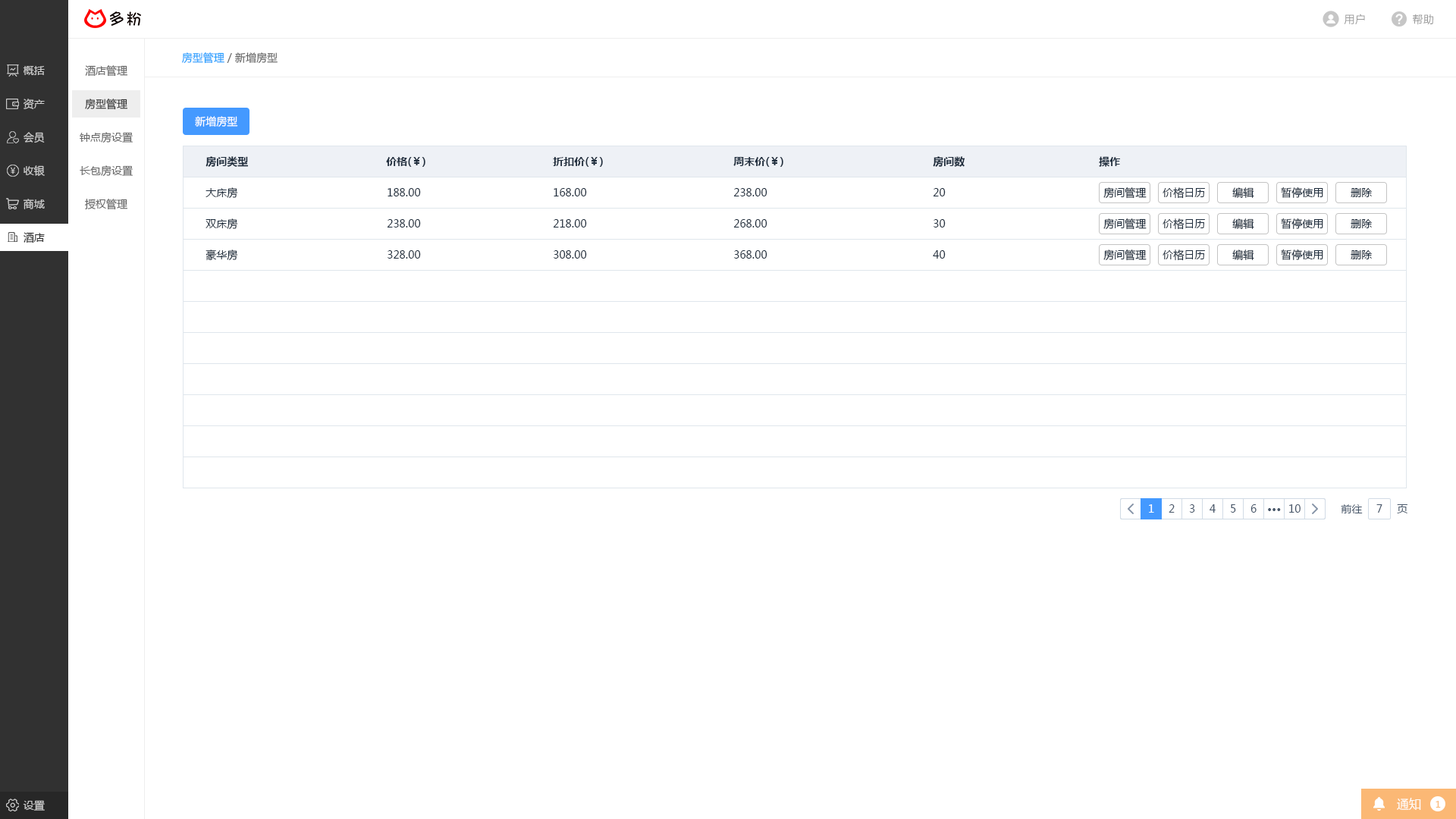
<style>
.page{position:relative;width:1456px;height:819px;background:#ffffff}
.page>*{position:absolute;margin:0}
.t1{font:10.6px "MicrosoftYaHei";letter-spacing:0.025em;color:#999999}
.t2{font:10.6px "MicrosoftYaHei";color:#666666}
.t3{font:10.6px "MicrosoftYaHei";color:#20a0ff}
.t4{font:10.6px "MicrosoftYaHei";color:#cccccc}
.t5{font:10.6px "MicrosoftYaHei";color:#333333}
.t6{font:10.6px "MicrosoftYaHei";color:#ffffff}
.t7{font:10.6px "MicrosoftYaHei-Bold";color:#1f2d3d}
.t8{font:10.6px "MicrosoftYaHei";color:#1f2d3d}
.t9{font:10.6px "MicrosoftYaHei";color:#313131}
.t10{font:10.6px "MicrosoftYaHei";color:#48576a}
.t11{font:10.6px "MicrosoftYaHei-Bold";color:#48576a}
.t12{font:12.1px "MicrosoftYaHei";color:#ffffff}
.t13{font:9.1px "MicrosoftYaHei";color:#fbb875}
</style>
<div class="page">
<p class="t1" style="left:1344px;top:14px;width:21px;height:11px">用户</p>
<p class="t1" style="left:1413px;top:14px;width:20px;height:11px">帮助</p>
<p class="t2" style="left:182px;top:52px;width:96px;height:12px"><span class="t3">房型管理</span> / 新增房型</p>
<p class="t4" style="left:23px;top:66px;width:22px;height:9px">概括</p>
<p class="t2" style="left:85px;top:65px;width:42px;height:12px">酒店管理</p>
<p class="t4" style="left:24px;top:99px;width:21px;height:10px">资产</p>
<p class="t5" style="left:85px;top:99px;width:42px;height:11px">房型管理</p>
<p class="t6" style="left:195px;top:116px;width:43px;height:11px">新增房型</p>
<p class="t4" style="left:24px;top:132px;width:21px;height:11px">会员</p>
<p class="t2" style="left:80px;top:132px;width:53px;height:11px">钟点房设置</p>
<p class="t7" style="left:206px;top:156px;width:42px;height:11px">房间类型</p>
<p class="t7" style="left:386px;top:157px;width:39px;height:10px">价格(￥)</p>
<p class="t7" style="left:553px;top:157px;width:50px;height:10px">折扣价(￥)</p>
<p class="t7" style="left:733px;top:157px;width:50px;height:10px">周末价(￥)</p>
<p class="t7" style="left:933px;top:156px;width:32px;height:11px">房间数</p>
<p class="t7" style="left:1099px;top:156px;width:21px;height:11px">操作</p>
<p class="t4" style="left:24px;top:165px;width:21px;height:11px">收银</p>
<p class="t2" style="left:80px;top:165px;width:53px;height:12px">长包房设置</p>
<p class="t8" style="left:206px;top:187px;width:32px;height:12px">大床房</p>
<p class="t8" style="left:388px;top:188px;width:33px;height:8px">188.00</p>
<p class="t8" style="left:554px;top:188px;width:33px;height:8px">168.00</p>
<p class="t8" style="left:733px;top:188px;width:34px;height:8px">238.00</p>
<p class="t8" style="left:933px;top:188px;width:13px;height:8px">20</p>
<p class="t8" style="left:1103px;top:187px;width:44px;height:12px">房间管理</p>
<p class="t8" style="left:1163px;top:187px;width:42px;height:12px">价格日历</p>
<p class="t8" style="left:1232px;top:187px;width:22px;height:11px">编辑</p>
<p class="t8" style="left:1281px;top:187px;width:42px;height:11px">暂停使用</p>
<p class="t8" style="left:1351px;top:188px;width:22px;height:9px">删除</p>
<p class="t4" style="left:23px;top:199px;width:22px;height:10px">商城</p>
<p class="t2" style="left:85px;top:199px;width:42px;height:11px">授权管理</p>
<p class="t8" style="left:206px;top:218px;width:32px;height:12px">双床房</p>
<p class="t8" style="left:387px;top:219px;width:34px;height:8px">238.00</p>
<p class="t8" style="left:553px;top:219px;width:34px;height:8px">218.00</p>
<p class="t8" style="left:733px;top:219px;width:34px;height:8px">268.00</p>
<p class="t8" style="left:933px;top:219px;width:13px;height:8px">30</p>
<p class="t8" style="left:1103px;top:218px;width:44px;height:12px">房间管理</p>
<p class="t8" style="left:1163px;top:218px;width:42px;height:12px">价格日历</p>
<p class="t8" style="left:1232px;top:218px;width:22px;height:11px">编辑</p>
<p class="t8" style="left:1281px;top:218px;width:42px;height:11px">暂停使用</p>
<p class="t8" style="left:1351px;top:219px;width:22px;height:9px">删除</p>
<p class="t9" style="left:24px;top:232px;width:21px;height:11px">酒店</p>
<p class="t8" style="left:206px;top:249px;width:32px;height:12px">豪华房</p>
<p class="t8" style="left:388px;top:250px;width:33px;height:9px">328.00</p>
<p class="t8" style="left:554px;top:250px;width:33px;height:9px">308.00</p>
<p class="t8" style="left:734px;top:250px;width:33px;height:9px">368.00</p>
<p class="t8" style="left:933px;top:250px;width:13px;height:9px">40</p>
<p class="t8" style="left:1103px;top:249px;width:44px;height:12px">房间管理</p>
<p class="t8" style="left:1163px;top:249px;width:42px;height:12px">价格日历</p>
<p class="t8" style="left:1232px;top:249px;width:22px;height:11px">编辑</p>
<p class="t8" style="left:1281px;top:249px;width:42px;height:11px">暂停使用</p>
<p class="t8" style="left:1351px;top:250px;width:22px;height:9px">删除</p>
<p class="t6" style="left:1149px;top:504px;width:5px;height:9px">1</p>
<p class="t10" style="left:1169px;top:504px;width:6px;height:9px">2</p>
<p class="t10" style="left:1189px;top:504px;width:6px;height:9px">3</p>
<p class="t10" style="left:1210px;top:504px;width:6px;height:9px">4</p>
<p class="t10" style="left:1231px;top:504px;width:5px;height:9px">5</p>
<p class="t10" style="left:1250px;top:504px;width:7px;height:9px">6</p>
<p class="t11" style="left:1268px;top:508px;width:13px;height:3px">···</p>
<p class="t10" style="left:1289px;top:504px;width:12px;height:9px">10</p>
<p class="t10" style="left:1341px;top:504px;width:22px;height:9px">前往</p>
<p class="t10" style="left:1376px;top:504px;width:6px;height:9px">7</p>
<p class="t10" style="left:1397px;top:504px;width:10px;height:9px">页</p>
<p class="t12" style="left:1397px;top:798px;width:24px;height:12px">通知</p>
<p class="t4" style="left:23px;top:800px;width:22px;height:11px">设置</p>
<p class="t13" style="left:1436px;top:801px;width:5px;height:7px">1</p>
</div>
